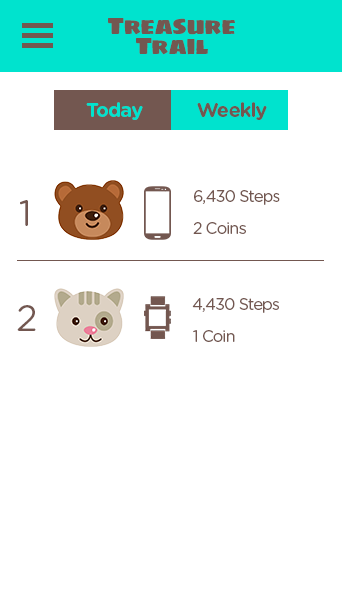
<style>
.page{position:relative;width:342px;height:612px;background:#ffffff}
.page>*{position:absolute;margin:0}
.t1{font:24px "Sigmar";letter-spacing:-0.05em;color:#735750}
.t2{font:20px "GothamRounded-Bold";letter-spacing:-0.05em;color:#00e3ce}
.t3{font:20px "GothamRounded-Bold";letter-spacing:-0.05em;color:#735750}
.t4{font:16px "GothamRounded-Book";letter-spacing:-0.05em;color:#735750}
.t5{font:36px "GothamRounded-Book";letter-spacing:-0.05em;color:#735750}
</style>
<div class="page">
<p class="t1" style="left:108px;top:18px;width:127px;height:37px">Treasure Trail</p>
<p class="t2" style="left:86px;top:102px;width:57px;height:18px">Today</p>
<p class="t3" style="left:197px;top:102px;width:70px;height:18px">Weekly</p>
<p class="t4" style="left:194px;top:190px;width:86px;height:15px">6,430 Steps</p>
<p class="t5" style="left:20px;top:200px;width:8px;height:26px">1</p>
<p class="t4" style="left:193px;top:222px;width:53px;height:12px">2 Coins</p>
<p class="t5" style="left:17px;top:305px;width:19px;height:26px">2</p>
<p class="t4" style="left:192px;top:298px;width:87px;height:15px">4,430 Steps</p>
<p class="t4" style="left:193px;top:330px;width:42px;height:12px">1 Coin</p>
</div>
